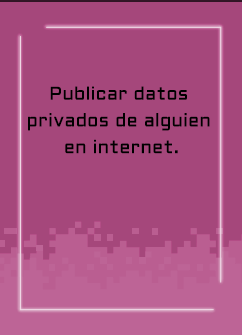
<style>
.page{position:relative;width:242px;height:335px;background:#a5477b}
.page>*{position:absolute;margin:0}
.t1{font:18.3px/26.7px "Aldrich-Regular";letter-spacing:0.015em;color:#000000}
</style>
<div class="page">
<p class="t1" style="left:28px;top:86px;width:182px;height:68px;text-align:center">Publicar datos <br>privados de alguien <br>en internet.</p>
</div>
